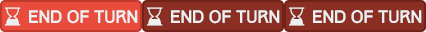
<style>
.page{position:relative;width:426px;height:32px;background:#8b2e24}
.page>*{position:absolute;margin:0}
.t1{font:16px "Track";color:#ecf0f1}
</style>
<div class="page">
<p class="t1" style="left:29px;top:10px;width:109px;height:14px">End of turn</p>
<p class="t1" style="left:171px;top:10px;width:109px;height:14px">End of turn</p>
<p class="t1" style="left:313px;top:10px;width:109px;height:14px">End of turn</p>
</div>
